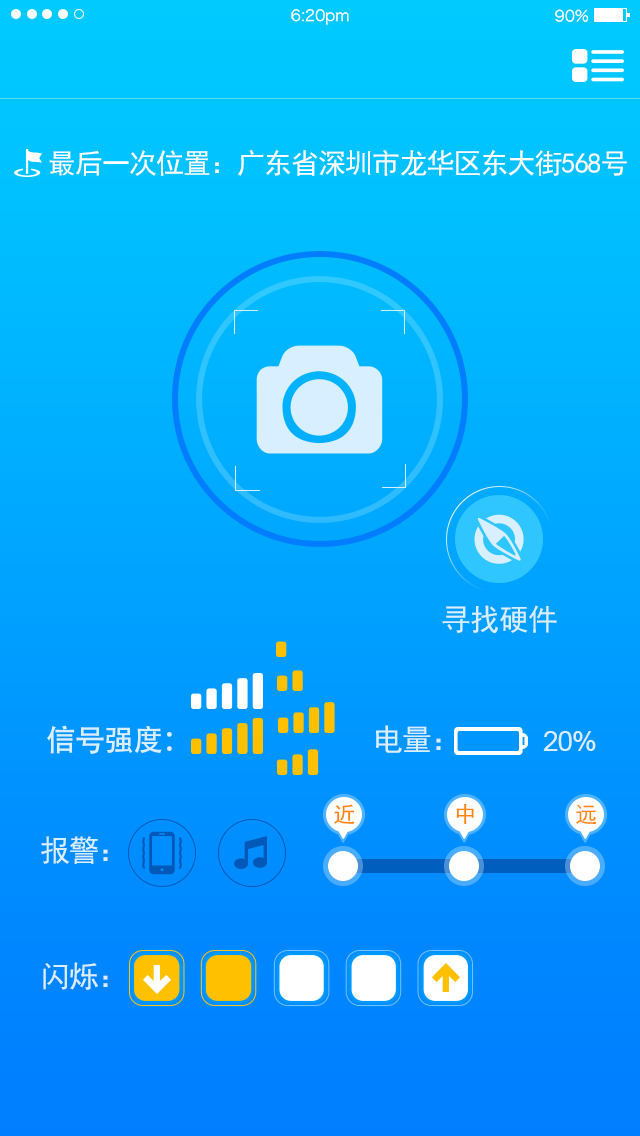
<style>
.page{position:relative;width:640px;height:1136px}
.page>*{position:absolute;margin:0}
.t1{font:15.5px "HiraginoSansGB-W3";color:#ffffff}
.t2{font:28px "SimHei";letter-spacing:-0.035em;color:#ffffff}
.t3{font:30px "SimHei";letter-spacing:-0.035em;color:#d8efff}
.t4{font:30px "AdobeHeitiStd-Regular";letter-spacing:-0.035em;color:#d8efff}
.t5{font:28px "ArialMT";letter-spacing:-0.035em;color:#d8efff}
.t6{font:22px "SimHei";letter-spacing:-0.035em;color:#ff8400}
</style>
<div class="page">
<p class="t1" style="left:291px;top:9px;width:58px;height:16px">6:20pm</p>
<p class="t1" style="left:555px;top:9px;width:33px;height:13px">90%</p>
<p class="t2" style="left:49px;top:149px;width:578px;height:27px">最后一次位置：广东省深圳市龙华区东大街568号</p>
<p class="t3" style="left:442px;top:605px;width:115px;height:28px">寻找硬件</p>
<p class="t4" style="left:47px;top:725px;width:125px;height:29px">信号强度：</p>
<p class="t3" style="left:376px;top:725px;width:65px;height:28px">电量：</p>
<p class="t5" style="left:543px;top:731px;width:53px;height:20px">20%</p>
<p class="t6" style="left:334px;top:804px;width:21px;height:20px">近</p>
<p class="t6" style="left:456px;top:803px;width:18px;height:22px">中</p>
<p class="t6" style="left:576px;top:804px;width:21px;height:21px">远</p>
<p class="t3" style="left:41px;top:836px;width:67px;height:28px">报警：</p>
<p class="t3" style="left:43px;top:962px;width:65px;height:28px">闪烁：</p>
</div>
